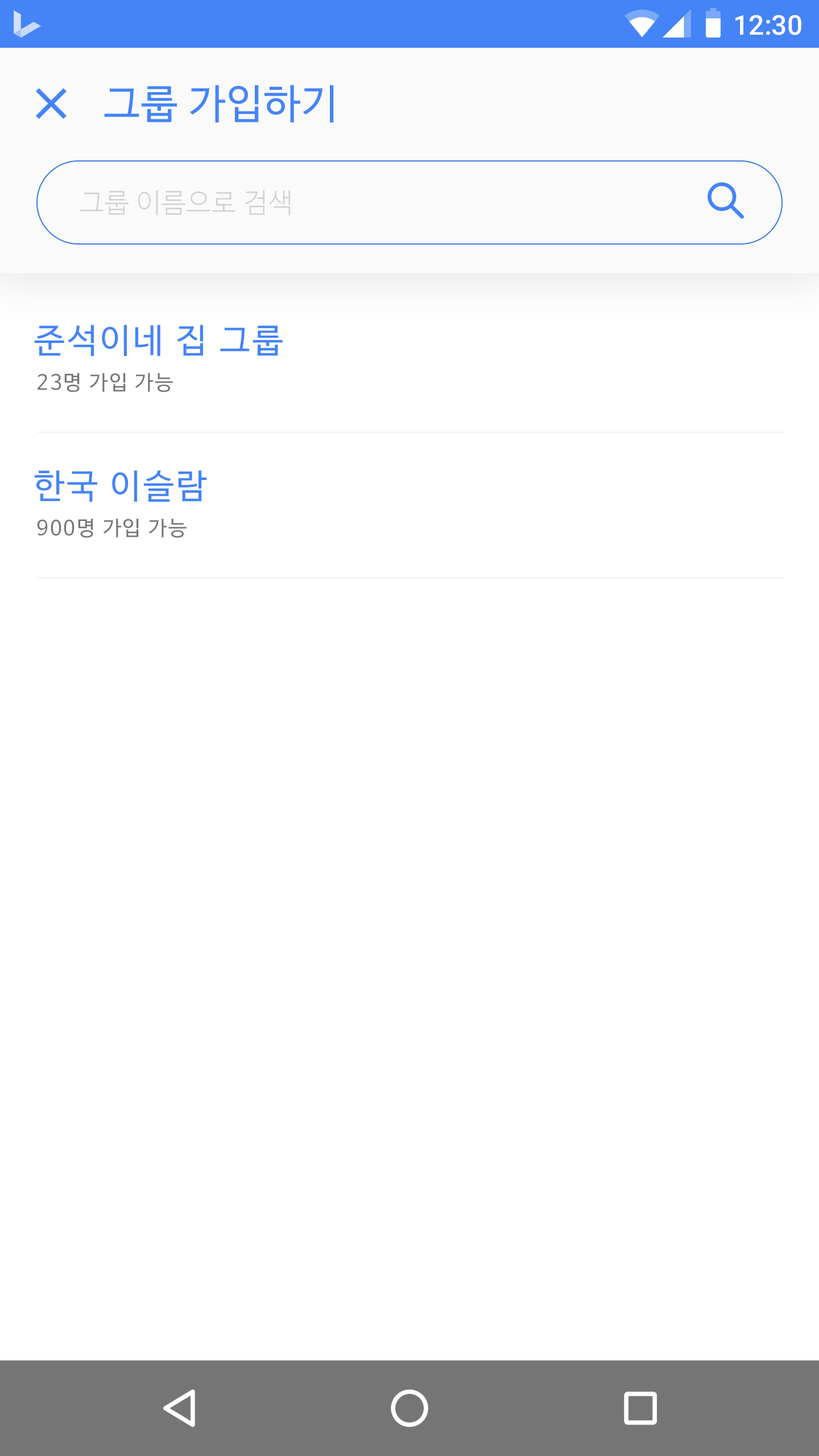
<style>
.page{position:relative;width:819px;height:1456px;background:#ffffff}
.page>*{position:absolute;margin:0}
.t1{font:27.3px "Roboto-Medium";color:#ffffff}
.t2{font:40.9px "NanumBarunGothic";letter-spacing:0.025em;color:#4484f6}
.t3{font:27.3px "NanumBarunGothicLight";letter-spacing:0.025em;color:#bdbdbd}
.t4{font:34.1px "NanumBarunGothic";letter-spacing:0.075em;color:#4484f6}
.t5{font:20.5px "NanumBarunGothic";letter-spacing:0.075em;color:#757575}
</style>
<div class="page">
<p class="t1" style="left:735px;top:15px;width:66px;height:20px">12:30</p>
<p class="t2" style="left:104px;top:85px;width:230px;height:38px">그룹 가입하기</p>
<p class="t3" style="left:80px;top:190px;width:210px;height:26px;opacity:0.7">그룹 이름으로 검색</p>
<p class="t4" style="left:34px;top:325px;width:249px;height:31px">준석이네 집 그룹</p>
<p class="t5" style="left:38px;top:373px;width:135px;height:19px">23명 가입 가능</p>
<p class="t4" style="left:35px;top:470px;width:171px;height:32px">한국 이슬람</p>
<p class="t5" style="left:37px;top:519px;width:150px;height:19px">900명 가입 가능</p>
</div>
